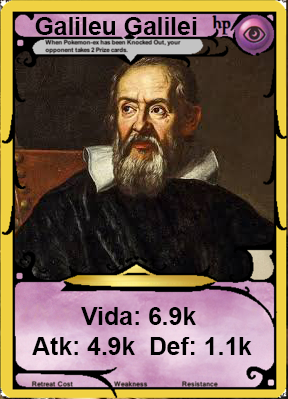
<style>
.page{position:relative;width:288px;height:399px}
.page>*{position:absolute;margin:0}
.t1{font:24.7px "Arial-BoldMT";color:#000000}
</style>
<div class="page">
<p class="t1" style="left:35px;top:17px;width:162px;height:18px">Galileu Galilei</p>
<p class="t1" style="left:32px;top:307px;width:220px;height:48px;text-align:center">Vida: 6.9k <br>Atk: 4.9k  Def: 1.1k</p>
</div>
